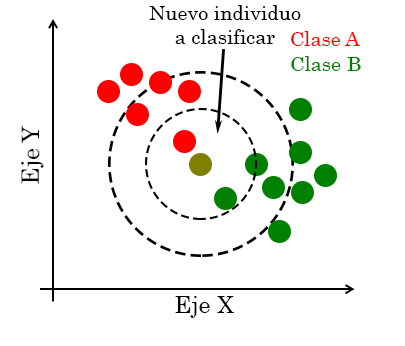
<style>
.page{position:relative;width:405px;height:346px;background:#ffffff}
.page>*{position:absolute;margin:0}
.t1{font:20px "Century";color:#000000}
.t2{font:20px "Century";color:#ff0000}
.t3{font:20px "Century";color:#008000}
.t4{font:24px "Century";color:#000000}
</style>
<div class="page">
<p class="t1" style="left:149px;top:5px;width:152px;height:39px;text-align:center">Nuevo individuo<br>a clasificar</p>
<p class="t2" style="left:291px;top:31px;width:69px;height:15px">Clase A</p>
<p class="t3" style="left:291px;top:56px;width:70px;height:15px">Clase B</p>
<p class="t4" style="left:21px;top:125px;width:23px;height:59px;rotate:-90deg">Eje Y</p>
<p class="t4" style="left:175px;top:296px;width:59px;height:22px">Eje X</p>
</div>
